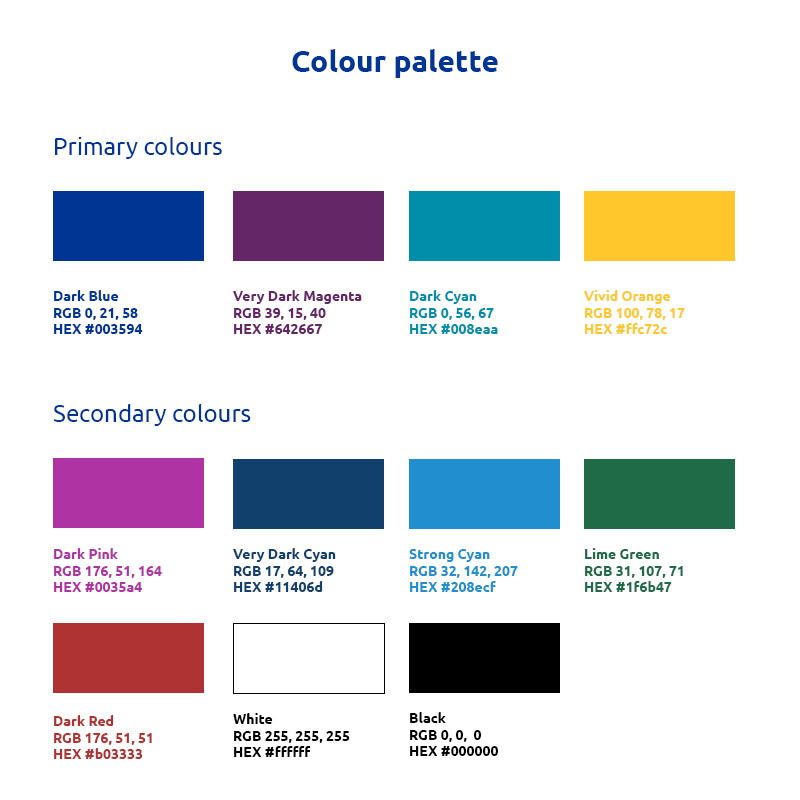
<style>
.page{position:relative;width:800px;height:800px;background:#ffffff}
.page>*{position:absolute;margin:0}
.t1{font:30px "Ubuntu-Bold";color:#003594}
.t2{font:24px "Ubuntu-Regular";color:#003594}
.t3{font:14px "Ubuntu-Bold";color:#003594}
.t4{font:14px "Ubuntu-Bold";color:#642667}
.t5{font:14px "Ubuntu-Bold";color:#008eaa}
.t6{font:14px "Ubuntu-Bold";color:#ffc72c}
.t7{font:14px "Ubuntu-Bold";color:#b033a4}
.t8{font:14px "Ubuntu-Bold";color:#11406d}
.t9{font:14px "Ubuntu-Bold";color:#208ecf}
.t10{font:14px "Ubuntu-Bold";color:#1f6b47}
.t11{font:14px "Ubuntu-Bold";color:#000000}
.t12{font:14px "Ubuntu-Bold";color:#b03333}
</style>
<div class="page">
<p class="t1" style="left:292px;top:49px;width:206px;height:29px">Colour palette</p>
<p class="t2" style="left:55px;top:137px;width:167px;height:22px">Primary colours</p>
<p class="t3" style="left:54px;top:290px;width:89px;height:44px">Dark Blue <br>RGB 0, 21, 58 <br>HEX #003594</p>
<p class="t4" style="left:233px;top:290px;width:129px;height:44px">Very Dark Magenta <br>RGB 39, 15, 40 <br>HEX #642667</p>
<p class="t5" style="left:410px;top:290px;width:88px;height:44px">Dark Cyan <br>RGB 0, 56, 67 <br>HEX #008eaa</p>
<p class="t6" style="left:584px;top:290px;width:101px;height:44px">Vivid Orange <br>RGB 100, 78, 17 <br>HEX #ffc72c</p>
<p class="t2" style="left:53px;top:404px;width:198px;height:22px">Secondary colours</p>
<p class="t7" style="left:54px;top:548px;width:108px;height:44px">Dark Pink<br>RGB 176, 51, 164<br>HEX #0035a4</p>
<p class="t8" style="left:233px;top:548px;width:103px;height:44px">Very Dark Cyan<br>RGB 17, 64, 109<br>HEX #11406d</p>
<p class="t9" style="left:409px;top:549px;width:109px;height:43px">Strong Cyan <br>RGB 32, 142, 207 <br>HEX #208ecf</p>
<p class="t10" style="left:585px;top:548px;width:98px;height:44px">Lime Green<br>RGB 31, 107, 71 <br>HEX #1f6b47</p>
<p class="t11" style="left:233px;top:713px;width:117px;height:44px">White<br>RGB 255, 255, 255 <br>HEX #ffffff</p>
<p class="t11" style="left:410px;top:712px;width:89px;height:44px">Black<br>RGB 0, 0,  0 <br>HEX #000000</p>
<p class="t12" style="left:54px;top:715px;width:98px;height:44px">Dark Red<br>RGB 176, 51, 51 <br>HEX #b03333</p>
</div>
